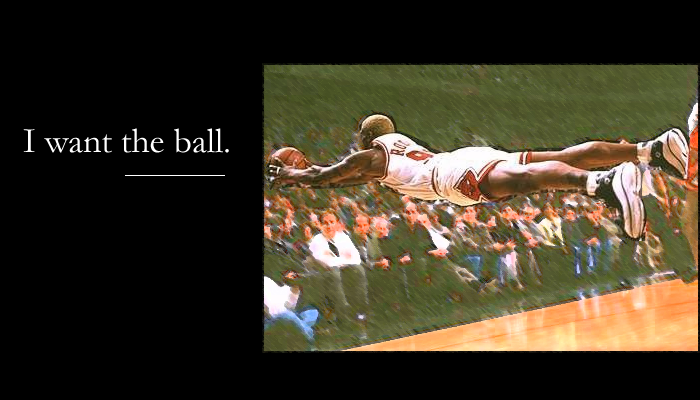
<style>
.page{position:relative;width:700px;height:400px;background:#000000}
.page>*{position:absolute;margin:0}
.t1{font:36px "Garamond";color:#ffffff}
</style>
<div class="page">
<p class="t1" style="left:23px;top:128px;width:206px;height:25px">I want the ball.</p>
</div>
